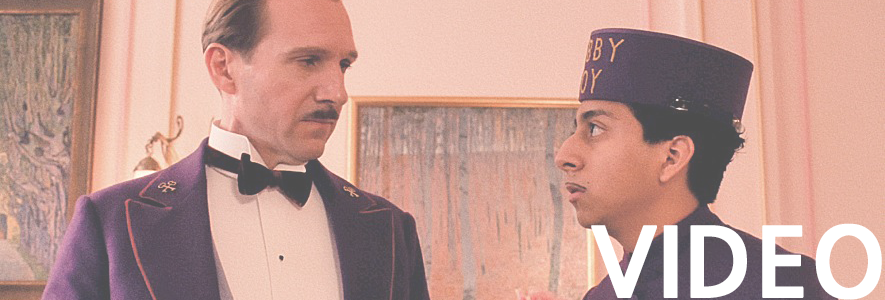
<style>
.page{position:relative;width:885px;height:300px}
.page>*{position:absolute;margin:0}
.t1{font:94.7px "NanumGothicBold";color:#ffffff;font-weight:bold}
</style>
<div class="page">
<p class="t1" style="left:591px;top:223px;width:291px;height:77px">VIDEO</p>
</div>
